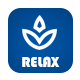
<style>
.page{position:relative;width:80px;height:80px;background:#ffffff}
.page>*{position:absolute;margin:0}
.t1{font:15px "Bauhaus93";color:#ffffff}
</style>
<div class="page">
<p class="t1" style="left:22px;top:56px;width:38px;height:11px">RELAX</p>
</div>
